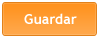
<style>
.page{position:relative;width:99px;height:38px}
.page>*{position:absolute;margin:0}
.t1{font:14px "TrebuchetMS-Bold";color:#ffffff}
</style>
<div class="page">
<p class="t1" style="left:24px;top:13px;width:53px;height:11px">Guardar</p>
</div>
